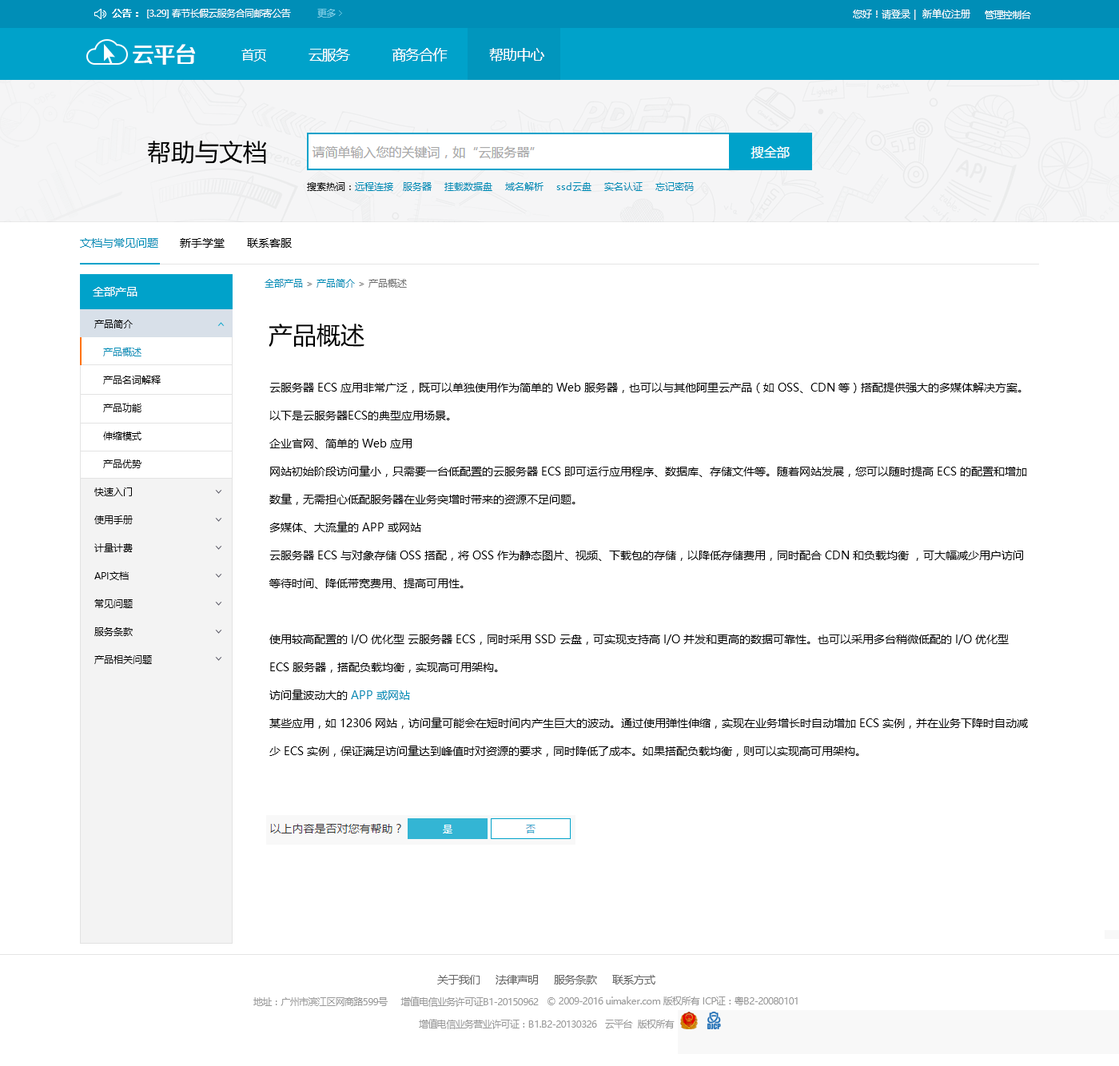
<style>
.page{position:relative;width:1119px;height:1066px;background:#ffffff}
.page>*{position:absolute;margin:0}
.t1{font:9.6px "MicrosoftYaHei";letter-spacing:-0.05em;color:#ffffff;font-weight:bold}
.t2{font:9.6px "MicrosoftYaHei";letter-spacing:-0.05em;color:#ffffff}
.t3{font:9.6px "MicrosoftYaHei";letter-spacing:-0.05em;color:#7bcee6}
.t4{font:9.6px "MicrosoftYaHei";color:#ffffff}
.t5{font:22.4px "FZZZHONGJW--GB1-0";letter-spacing:-0.05em;color:#ffffff}
.t6{font:14.4px "MicrosoftYaHei";letter-spacing:-0.05em;color:#ffffff}
.t7{font:12.8px "MicrosoftYaHei";letter-spacing:-0.05em;color:#ffffff}
.t8{font:24px "MicrosoftYaHei";color:#000000}
.t9{font:9.6px "MicrosoftYaHei";color:#008eb7}
.t10{font:9.6px "MicrosoftYaHei";color:#000000}
.t11{font:11.2px "MicrosoftYaHei";color:#008eb7}
.t12{font:11.2px "MicrosoftYaHei";color:#000000}
.t13{font:9.6px "MicrosoftYaHei";color:#727272}
.t14{font:11.2px "MicrosoftYaHei";color:#ffffff}
.t15{font:9.6px/28px "MicrosoftYaHei";color:#000000}
.t16{font:9.6px/28px "MicrosoftYaHei";color:#008eb7}
.t17{font:11.2px/28px "MicrosoftYaHei";color:#000000}
.t18{font:11.2px/28px "MicrosoftYaHei";color:#008eb7}
.t19{font:11.2px "MicrosoftYaHei";letter-spacing:-0.05em;color:#666666}
.t20{font:9.6px "MicrosoftYaHei";letter-spacing:-0.05em;color:#999999}
</style>
<div class="page">
<p class="t1" style="left:112px;top:9px;width:26px;height:9px">公告：</p>
<p class="t2" style="left:147px;top:9px;width:144px;height:9px">[3.29] 春节长假云服务合同邮寄公告</p>
<p class="t3" style="left:317px;top:9px;width:19px;height:9px">更多</p>
<p class="t4" style="left:853px;top:9px;width:117px;height:11px">您好！请登录 |  新单位注册</p>
<p class="t2" style="left:984px;top:10px;width:47px;height:9px">管理控制台</p>
<p class="t5" style="left:133px;top:44px;width:63px;height:21px">云平台</p>
<p class="t6" style="left:241px;top:48px;width:303px;height:14px"><span class="t7">首页</span>             云服务             商务合作             帮助中心</p>
<p class="t8" style="left:148px;top:141px;width:119px;height:23px">帮助与文档</p>
<p class="t9" style="left:307px;top:182px;width:387px;height:9px"><span class="t10">搜索热词：</span>远程连接   服务器    挂载数据盘    域名解析    ssd云盘    实名认证    忘记密码</p>
<p class="t11" style="left:80px;top:238px;width:78px;height:10px">文档与常见问题</p>
<p class="t12" style="left:180px;top:238px;width:45px;height:10px">新手学堂</p>
<p class="t12" style="left:247px;top:238px;width:45px;height:10px">联系客服</p>
<p class="t13" style="left:264px;top:279px;width:143px;height:9px"><span class="t9">全部产品</span> &gt; <span class="t9">产品简介 </span>&gt; 产品概述</p>
<p class="t14" style="left:93px;top:287px;width:44px;height:9px">全部产品</p>
<p class="t15" style="left:94px;top:320px;width:58px;height:344px">产品简介<br><br><br><br><br><br>快速入门<br>使用手册<br>计量计费<br>API文档<br>常见问题<br>服务条款<br>产品相关问题</p>
<p class="t8" style="left:268px;top:324px;width:96px;height:23px">产品概述</p>
<p class="t15" style="left:103px;top:348px;width:58px;height:120px"><span class="t16">产品概述<br></span>产品名词解释<br>产品功能<br>伸缩模式<br>产品优势</p>
<p class="t17" style="left:269px;top:383px;width:759px;height:374px">云服务器 ECS 应用非常广泛，既可以单独使用作为简单的 Web 服务器，也可以与其他阿里云产品（如 OSS、CDN 等）搭配提供强大的多媒体解决方案。以下是云服务器ECS的典型应用场景。<br>企业官网、简单的 Web 应用<br>网站初始阶段访问量小，只需要一台低配置的云服务器 ECS 即可运行应用程序、数据库、存储文件等。随着网站发展，您可以随时提高 ECS 的配置和增加数量，无需担心低配服务器在业务突增时带来的资源不足问题。<br>多媒体、大流量的 APP 或网站<br>云服务器 ECS 与对象存储 OSS 搭配，将 OSS 作为静态图片、视频、下载包的存储，以降低存储费用，同时配合 CDN 和负载均衡 ，可大幅减少用户访问等待时间、降低带宽费用、提高可用性。<br><br>使用较高配置的 I/O 优化型 云服务器 ECS，同时采用 SSD 云盘，可实现支持高 I/O 并发和更高的数据可靠性。也可以采用多台稍微低配的 I/O 优化型 ECS 服务器，搭配负载均衡，实现高可用架构。<br>访问量波动大的 <span class="t18">APP 或网站<br></span>某些应用，如 12306 网站，访问量可能会在短时间内产生巨大的波动。通过使用弹性伸缩，实现在业务增长时自动增加 ECS 实例，并在业务下降时自动减少 ECS 实例，保证满足访问量达到峰值时对资源的要求，同时降低了成本。如果搭配负载均衡，则可以实现高可用架构。</p>
<p class="t19" style="left:437px;top:975px;width:218px;height:9px">关于我们      法律声明      服务条款      联系方式</p>
<p class="t20" style="left:253px;top:996px;width:286px;height:11px">地址：广州市滨江区网商路599号     增值电信业务许可证B1-20150962</p>
<p class="t20" style="left:547px;top:996px;width:250px;height:9px">© 2009-2016 uimaker.com 版权所有 ICP证：粤B2-20080101</p>
<p class="t20" style="left:419px;top:1019px;width:255px;height:10px">增值电信业务营业许可证：B1.B2-20130326   云平台  版权所有</p>
</div>
